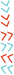
<style>
.page{position:relative;width:14px;height:75px;background:#ffffff}
.page>*{position:absolute;margin:0}
.t1{font:16px "ThrowMyHandsUpintheAir";color:#71cbd3;text-transform:uppercase}
.t2{font:16px "ThrowMyHandsUpintheAir";color:#e13c20;text-transform:uppercase}
</style>
<div class="page">
<p class="t1" style="left:0px;top:0px;width:10px;height:13px;rotate:90deg">&gt;&gt;</p>
<p class="t2" style="left:0px;top:14px;width:10px;height:13px;rotate:90deg">&gt;&gt;</p>
<p class="t2" style="left:0px;top:31px;width:14px;height:10px">&gt;&gt;</p>
<p class="t2" style="left:0px;top:54px;width:14px;height:9px;rotate:-180deg">&gt;&gt;</p>
<p class="t1" style="left:0px;top:42px;width:14px;height:10px">&gt;&gt;</p>
<p class="t1" style="left:0px;top:65px;width:14px;height:9px;rotate:-180deg">&gt;&gt;</p>
</div>
